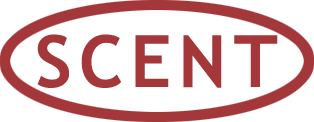
<style>
.page{position:relative;width:314px;height:122px;background:#ffffff}
.page>*{position:absolute;margin:0}
.t1{font:72px "TrebuchetMS-Bold";letter-spacing:0.1em;color:#a4373a}
</style>
<div class="page">
<p class="t1" style="left:37px;top:34px;width:241px;height:54px">SCENT</p>
</div>
